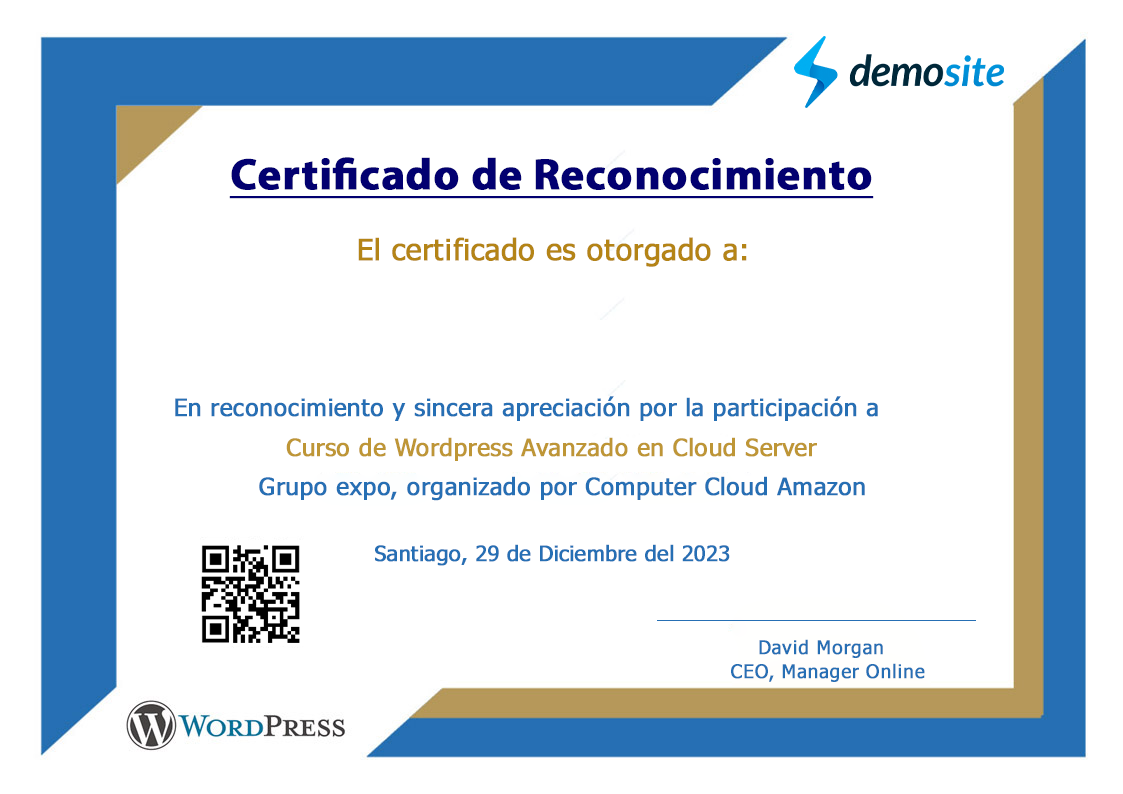
<style>
.page{position:relative;width:1123px;height:794px;background:#ffffff}
.page>*{position:absolute;margin:0}
.t1{font:44px "MyriadPro-Bold";letter-spacing:0.01em;color:#020070;font-weight:bold;text-decoration:underline}
.t2{font:29.3px "Tahoma";letter-spacing:0.01em;color:#b48416;font-weight:bold}
.t3{font:24px "Tahoma";letter-spacing:0.01em;color:#266fb4;font-weight:bold}
.t4{font:24px "Tahoma";letter-spacing:0.01em;color:#be9636;font-weight:bold}
.t5{font:21.3px "Tahoma";letter-spacing:0.01em;color:#266fb4;font-weight:bold}
.t6{font:18.7px/24px "Tahoma";letter-spacing:0.03em;color:#266fb4;font-weight:bold}
</style>
<div class="page">
<p class="t1" style="left:229px;top:157px;width:645px;height:42px">Certificado de Reconocimiento</p>
<p class="t2" style="left:358px;top:237px;width:389px;height:30px">El certificado es otorgado a:</p>
<p class="t3" style="left:175px;top:396px;width:703px;height:25px">En reconocimiento y sincera apreciación por la participación a</p>
<p class="t4" style="left:286px;top:437px;width:531px;height:24px">Curso de Wordpress Avanzado en Cloud Server</p>
<p class="t3" style="left:259px;top:476px;width:606px;height:25px">Grupo expo, organizado por Computer Cloud Amazon</p>
<p class="t5" style="left:375px;top:544px;width:355px;height:22px">Santiago, 29 de Diciembre del 2023</p>
<p class="t6" style="left:731px;top:639px;width:194px;height:43px;text-align:center">David Morgan<br>  CEO, Manager Online</p>
</div>
